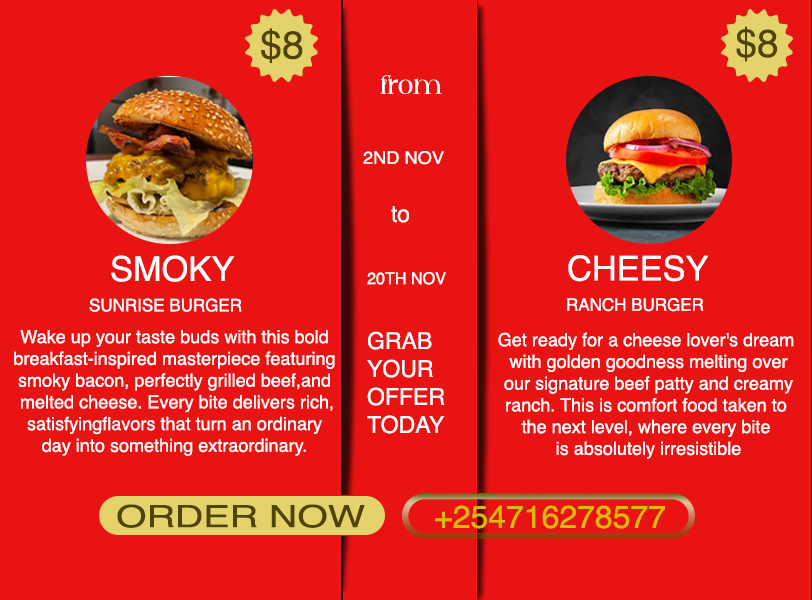
<style>
.page{position:relative;width:812px;height:600px;background:#ea1313}
.page>*{position:absolute;margin:0}
.t1{font:38.9px "Helvetica";color:#504404}
.t2{font:38.8px "Helvetica";color:#504404}
.t3{font:20.9px "against-Regular";color:#ffffff;scale:0.96 1}
.t4{font:17.2px "Helvetica";color:#ffffff;scale:1.06 1}
.t5{font:23.1px "Helvetica";color:#ffffff}
.t6{font:34.4px "Helvetica";color:#ffffff}
.t7{font:34.3px "Helvetica";color:#ffffff}
.t8{font:16.4px "Helvetica";color:#ffffff}
.t9{font:17.2px "Helvetica";color:#ffffff}
.t10{font:18.1px "Helvetica";color:#ffffff}
.t11{font:23.3px "Helvetica";color:#ffffff}
.t12{font:30.7px "Helvetica";color:#504404;scale:1.28 1}
.t13{font:31.4px "Helvetica";color:#dbba03}
</style>
<div class="page">
<p class="t1" style="left:261px;top:28px;width:42px;height:35px">$8</p>
<p class="t2" style="left:736px;top:26px;width:42px;height:36px">$8</p>
<p class="t3" style="left:380px;top:75px;width:62px;height:19px">from</p>
<p class="t4" style="left:363px;top:151px;width:81px;height:14px">2ND NOV</p>
<p class="t5" style="left:391px;top:206px;width:18px;height:17px">to</p>
<p class="t6" style="left:111px;top:255px;width:124px;height:27px">SMOKY</p>
<p class="t7" style="left:568px;top:255px;width:141px;height:27px">CHEESY</p>
<p class="t8" style="left:367px;top:272px;width:79px;height:13px">20TH NOV</p>
<p class="t9" style="left:89px;top:298px;width:153px;height:14px">SUNRISE BURGER</p>
<p class="t9" style="left:567px;top:298px;width:137px;height:14px">RANCH BURGER</p>
<p class="t10" style="left:14px;top:330px;width:321px;height:126px;text-align:center">Wake up your taste buds with this bold<br> breakfast-inspired masterpiece featuring <br>smoky bacon, perfectly grilled beef,and<br> melted cheese. Every bite delivers rich,<br> satisfyingflavors that turn an ordinary <br>day into something extraordinary.</p>
<p class="t11" style="left:367px;top:331px;width:78px;height:103px">GRAB<br>YOUR<br>OFFER<br>TODAY</p>
<p class="t10" style="left:498px;top:332px;width:296px;height:127px;text-align:center">Get ready for a cheese lover's dream <br>with golden goodness melting over<br> our signature beef patty and creamy <br>ranch. This is comfort food taken to <br>the next level, where every bite <br>is absolutely irresistible</p>
<p class="t12" style="left:117px;top:504px;width:248px;height:24px">ORDER NOW</p>
<p class="t13" style="left:435px;top:505px;width:230px;height:24px">+254716278577</p>
</div>
